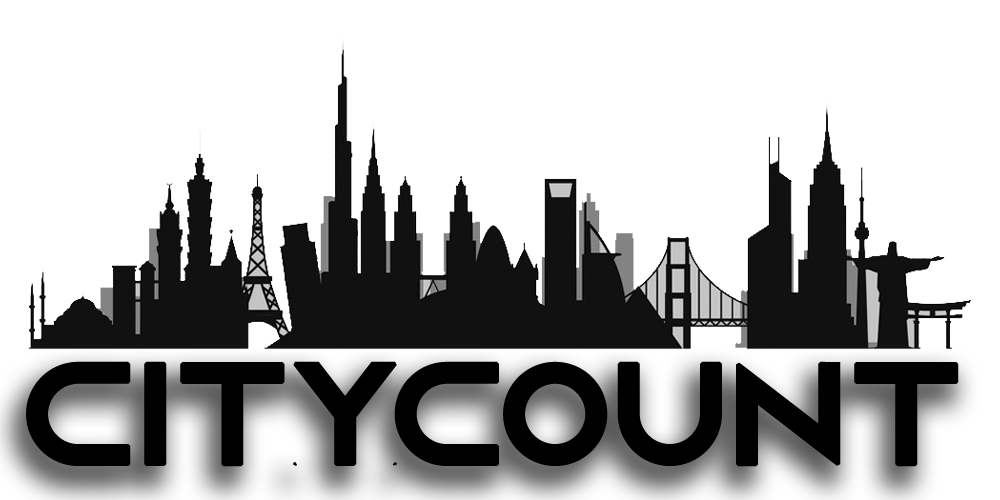
<style>
.page{position:relative;width:1000px;height:500px;background:#ffffff}
.page>*{position:absolute;margin:0}
.t1{font:143px "AzonixRegular";color:#111111;font-weight:bold}
</style>
<div class="page">
<p class="t1" style="left:26px;top:361px;width:933px;height:106px">CITYCOUNT</p>
</div>
